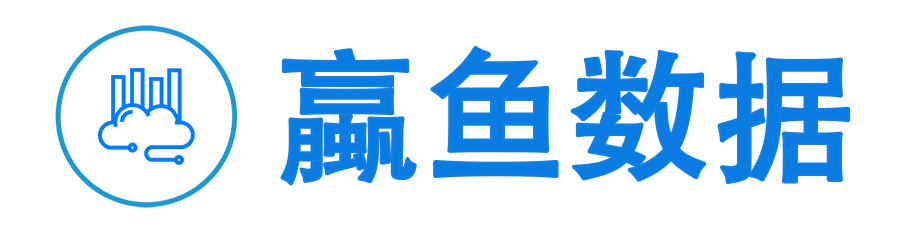
<style>
.page{position:relative;width:903px;height:233px;background:#ffffff}
.page>*{position:absolute;margin:0}
.t1{font:145.1px "AdobeHeitiStd-Regular";color:#0a7be0}
</style>
<div class="page">
<p class="t1" style="left:282px;top:47px;width:567px;height:137px">蠃鱼数据</p>
</div>
